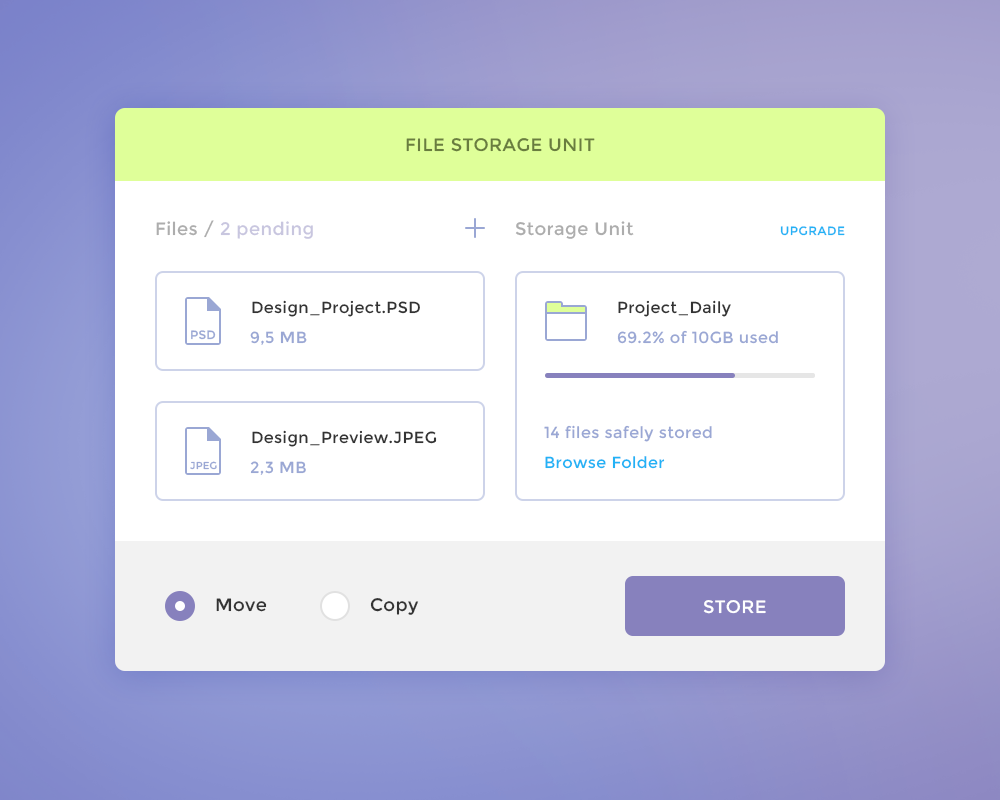
<style>
.page{position:relative;width:1000px;height:800px;background:#ffffff}
.page>*{position:absolute;margin:0}
.t1{font:18px "Montserrat-Regular";letter-spacing:0.025em;color:#697d3f;text-transform:uppercase}
.t2{font:18px "Montserrat-Regular";letter-spacing:0.025em}
.t3{font:18px "Montserrat-Regular";letter-spacing:0.025em;color:#adadad}
.t4{font:12px "Montserrat-Regular";letter-spacing:0.05em;color:#22b2f5;text-transform:uppercase}
.t5{font:16px "Montserrat-Regular";letter-spacing:0.025em;color:#333333}
.t6{font:12px "Montserrat-Regular";letter-spacing:0.025em;color:#9aa7d4}
.t7{font:16px "Montserrat-Regular";letter-spacing:0.025em;color:#9aa7d4}
.t8{font:10px "Montserrat-Regular";letter-spacing:0.025em;color:#9aa7d4}
.t9{font:16px "Montserrat-Regular";letter-spacing:0.025em;color:#22b2f5}
.t10{font:18px "Montserrat-Regular";letter-spacing:0.025em;color:#333333}
.t11{font:18px "Montserrat-Regular";letter-spacing:0.025em;color:#ffffff;text-transform:uppercase}
</style>
<div class="page">
<p class="t1" style="left:406px;top:138px;width:189px;height:14px">File Storage Unit</p>
<p class="t2" style="left:156px;top:220px;width:157px;height:19px">Files / 2 pending</p>
<p class="t3" style="left:515px;top:221px;width:119px;height:18px">Storage Unit</p>
<p class="t4" style="left:780px;top:226px;width:65px;height:10px">upgrade</p>
<p class="t5" style="left:252px;top:300px;width:168px;height:17px">Design_Project.PSD</p>
<p class="t5" style="left:618px;top:300px;width:113px;height:17px">Project_Daily</p>
<p class="t6" style="left:191px;top:330px;width:25px;height:10px">PSD</p>
<p class="t7" style="left:250px;top:331px;width:57px;height:14px">9,5 MB</p>
<p class="t7" style="left:617px;top:330px;width:161px;height:14px">69.2% of 10GB used</p>
<p class="t7" style="left:544px;top:425px;width:168px;height:17px">14 files safely stored</p>
<p class="t5" style="left:252px;top:430px;width:185px;height:17px">Design_Preview.JPEG</p>
<p class="t8" style="left:190px;top:461px;width:27px;height:9px">JPEG</p>
<p class="t7" style="left:250px;top:461px;width:56px;height:14px">2,3 MB</p>
<p class="t9" style="left:545px;top:456px;width:120px;height:13px">Browse Folder</p>
<p class="t10" style="left:216px;top:598px;width:51px;height:14px">Move</p>
<p class="t10" style="left:370px;top:598px;width:49px;height:17px">Copy</p>
<p class="t11" style="left:703px;top:600px;width:63px;height:14px">Store</p>
</div>
